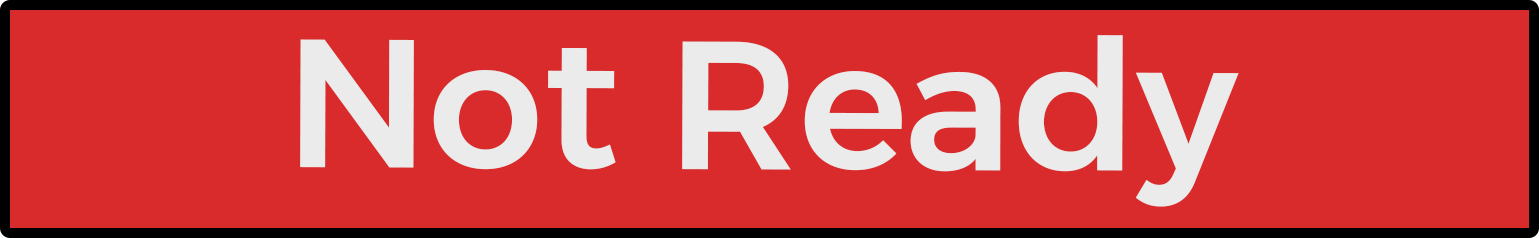
<style>
.page{position:relative;width:1539px;height:238px;background:#d92b2b}
.page>*{position:absolute;margin:0}
.t1{font:182.1px "ArgentumSans-Medium";color:#ebebeb}
</style>
<div class="page">
<p class="t1" style="left:300px;top:35px;width:939px;height:172px">Not Ready</p>
</div>
